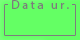
<style>
.page{position:relative;width:80px;height:40px;background:#64ff64}
.page>*{position:absolute;margin:0}
.t1{font:12.5px "MyriadPro-Regular";letter-spacing:0.2em;color:#7c7c7c}
</style>
<div class="page">
<p class="t1" style="left:12px;top:0px;width:57px;height:9px">Data ur.</p>
</div>
